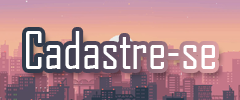
<style>
.page{position:relative;width:240px;height:100px}
.page>*{position:absolute;margin:0}
.t1{font:50px "AgencyFB-Reg";color:#ffffff}
</style>
<div class="page">
<p class="t1" style="left:26px;top:31px;width:189px;height:38px">Cadastre-se</p>
</div>
